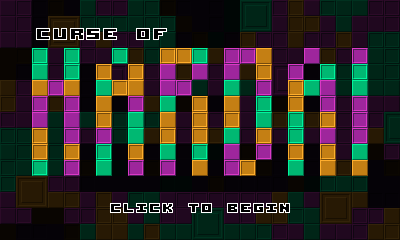
<style>
.page{position:relative;width:400px;height:240px}
.page>*{position:absolute;margin:0}
.t1{font:26px "AcknowledgeTT-BRK-";letter-spacing:0.1em;color:#000000}
.t2{font:20px "AcknowledgeTT-BRK-";letter-spacing:0.1em;color:#000000;text-transform:uppercase}
</style>
<div class="page">
<p class="t1" style="left:37px;top:29px;width:129px;height:10px">CURSE OF</p>
<p class="t2" style="left:111px;top:204px;width:178px;height:8px">click to begin</p>
</div>
